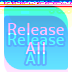
<style>
.page{position:relative;width:72px;height:72px}
.page>*{position:absolute;margin:0}
.t1{font:16px "JK-Gothic-M"}
</style>
<div class="page">
<p class="t1" style="left:8px;top:20px;width:56px;height:33px;text-align:center">Release<br>All</p>
</div>
